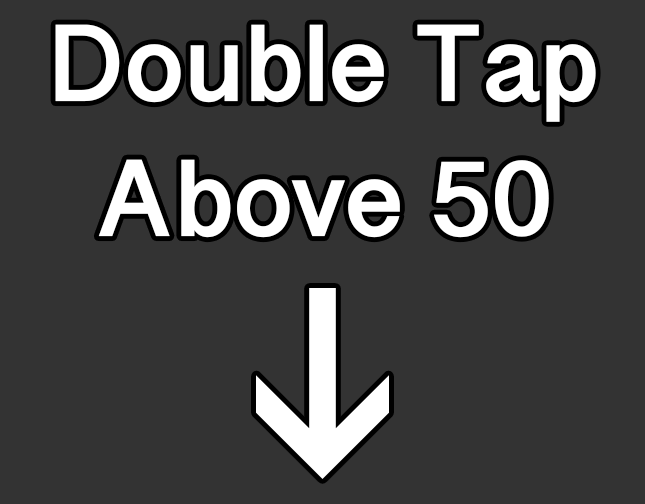
<style>
.page{position:relative;width:645px;height:504px;background:#333333}
.page>*{position:absolute;margin:0}
.t1{font:112.5px "SinhalaSangamMN-Bold";color:#ffffff}
</style>
<div class="page">
<p class="t1" style="left:55px;top:24px;width:541px;height:214px;text-align:center">Double Tap<br>Above 50</p>
</div>
